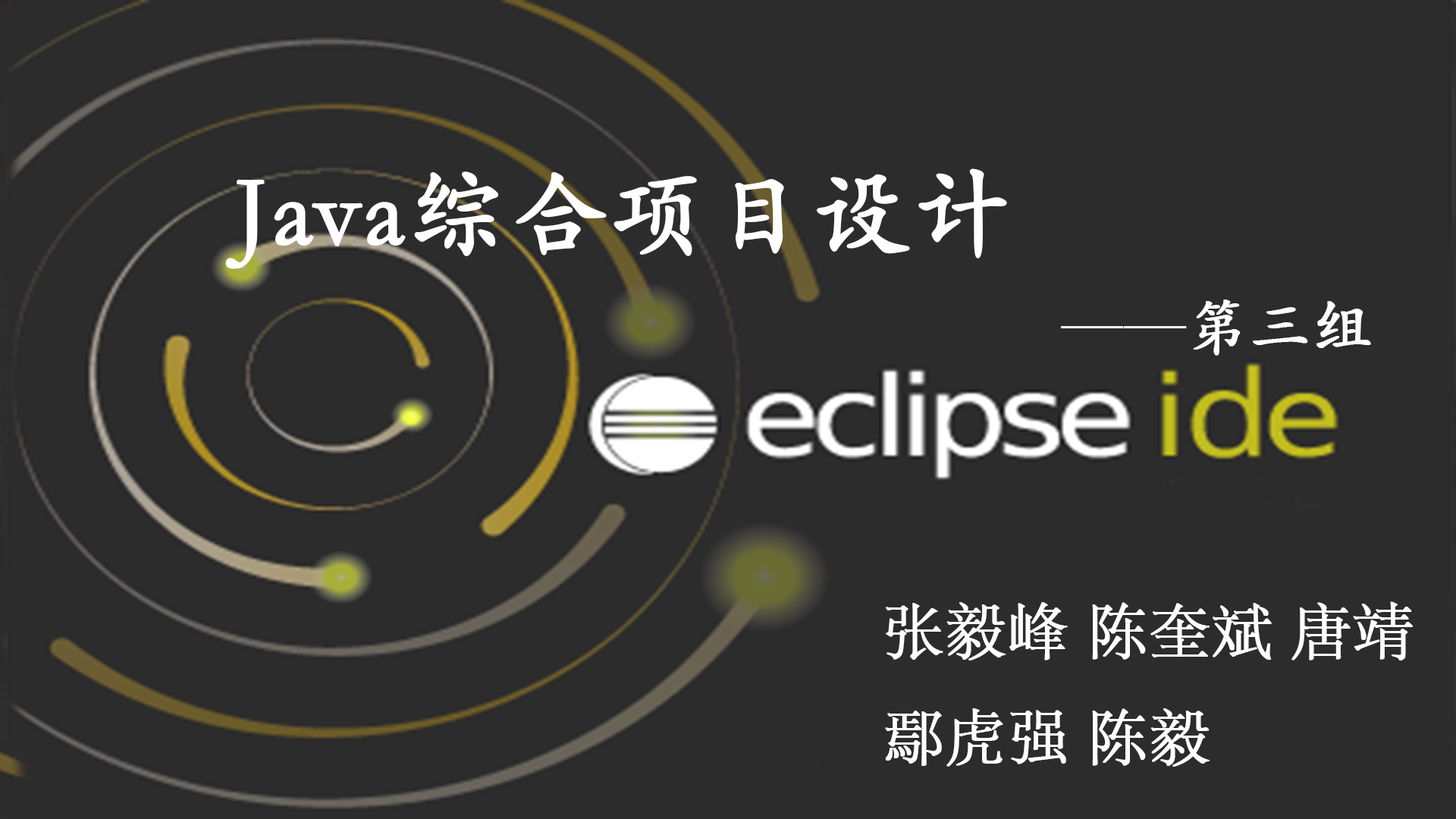
<style>
.page{position:relative;width:1456px;height:819px;background:#2d2c2c}
.page>*{position:absolute;margin:0}
.t1{font:98.6px "STKaiti";color:#ffffff;font-weight:bold}
.t2{font:60.7px "STKaiti";color:#ffffff;font-weight:bold}
.t3{font:60.7px "STSong";color:#ffffff;font-weight:bold}
</style>
<div class="page">
<p class="t1" style="left:225px;top:168px;width:782px;height:101px">Java综合项目设计</p>
<p class="t2" style="left:1061px;top:300px;width:310px;height:56px">——第三组</p>
<p class="t3" style="left:885px;top:601px;width:528px;height:166px">张毅峰 陈奎斌 唐靖 <br>鄢虎强 陈毅</p>
</div>
